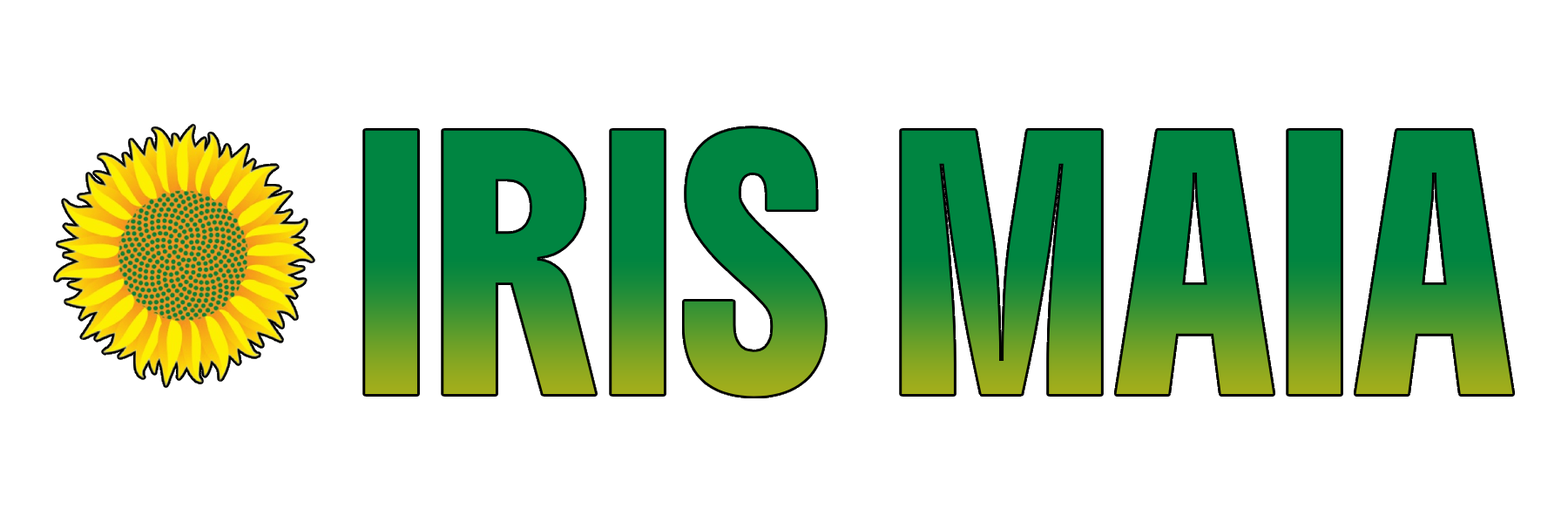
<style>
.page{position:relative;width:1568px;height:523px;background:#ffffff}
.page>*{position:absolute;margin:0}
.t1{font:221.3px "Boldonse-Regular"}
</style>
<div class="page">
<p class="t1" style="left:365px;top:128px;width:1148px;height:268px">IRIS MAIA</p>
</div>
